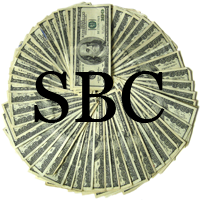
<style>
.page{position:relative;width:200px;height:200px;background:#ffffff}
.page>*{position:absolute;margin:0}
.t1{font:72px "Georgia";color:#000000}
</style>
<div class="page">
<p class="t1" style="left:34px;top:71px;width:131px;height:52px">SBC</p>
</div>
